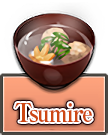
<style>
.page{position:relative;width:108px;height:135px}
.page>*{position:absolute;margin:0}
.t1{font:25px "RyuminPro-ExBold";letter-spacing:-0.08em;color:#cd4714;scale:0.9 1}
</style>
<div class="page">
<p class="t1" style="left:15px;top:103px;width:77px;height:20px">Tsumire</p>
</div>
